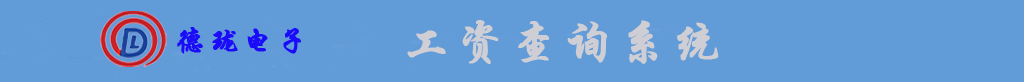
<style>
.page{position:relative;width:1024px;height:82px;background:#619bd8}
.page>*{position:absolute;margin:0}
.t1{font:30px "STXingkai";letter-spacing:0.1em;color:#1c0bf9;font-weight:bold}
.t2{font:48px "STXingkai";letter-spacing:0.1em;color:#cfced4;font-weight:bold}
</style>
<div class="page">
<p class="t1" style="left:177px;top:27px;width:124px;height:27px">德珑电子</p>
<p class="t2" style="left:407px;top:20px;width:312px;height:44px">工资查询系统</p>
</div>
